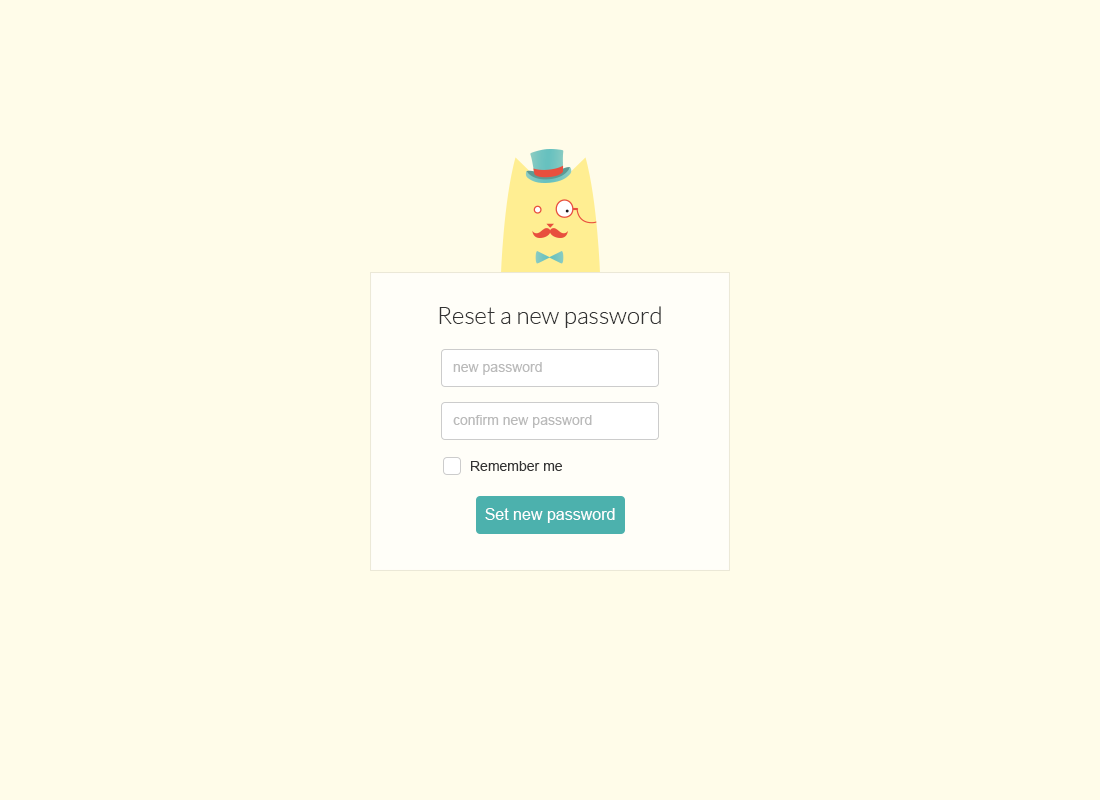
<style>
.page{position:relative;width:1100px;height:800px;background:#fffce9}
.page>*{position:absolute;margin:0}
.t1{font:24px "Lato-Light";color:#333333}
.t2{font:14px "ArialMT";color:#bababa}
.t3{font:14px "ArialMT";color:#333333}
.t4{font:16px "ArialMT";color:#ffffff}
</style>
<div class="page">
<p class="t1" style="left:439px;top:306px;width:222px;height:22px">Reset a new password</p>
<p class="t2" style="left:453px;top:362px;width:89px;height:13px">new password</p>
<p class="t2" style="left:453px;top:415px;width:139px;height:13px">confirm new password</p>
<p class="t3" style="left:471px;top:461px;width:91px;height:10px">Remember me</p>
<p class="t4" style="left:485px;top:508px;width:130px;height:15px">Set new password</p>
</div>
